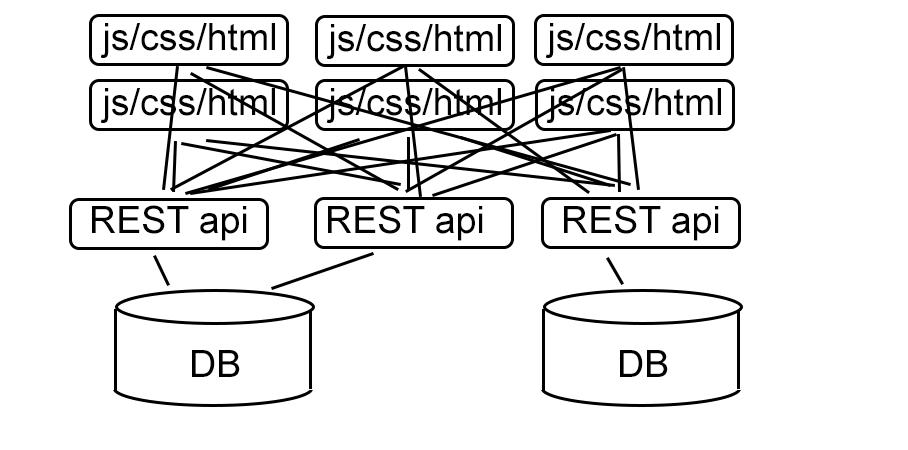
<style>
.page{position:relative;width:908px;height:450px;background:#ffffff}
.page>*{position:absolute;margin:0}
.t1{font:37.5px "ArialMT";color:#000000}
</style>
<div class="page">
<p class="t1" style="left:100px;top:23px;width:175px;height:35px">js/css/html</p>
<p class="t1" style="left:326px;top:24px;width:175px;height:35px">js/css/html</p>
<p class="t1" style="left:545px;top:23px;width:175px;height:35px">js/css/html</p>
<p class="t1" style="left:100px;top:88px;width:175px;height:35px">js/css/html</p>
<p class="t1" style="left:326px;top:88px;width:175px;height:35px">js/css/html</p>
<p class="t1" style="left:546px;top:88px;width:175px;height:35px">js/css/html</p>
<p class="t1" style="left:92px;top:205px;width:155px;height:36px">REST api</p>
<p class="t1" style="left:328px;top:205px;width:155px;height:36px">REST api</p>
<p class="t1" style="left:564px;top:205px;width:155px;height:36px">REST api</p>
<p class="t1" style="left:192px;top:350px;width:48px;height:27px">DB</p>
<p class="t1" style="left:620px;top:350px;width:48px;height:27px">DB</p>
</div>
